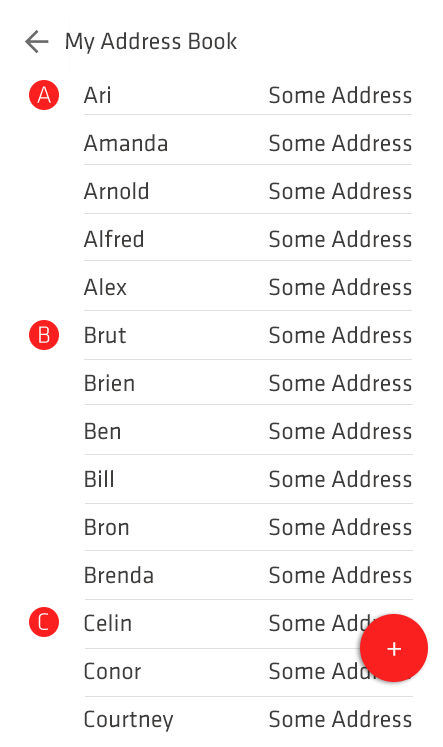
<style>
.page{position:relative;width:443px;height:747px;background:#ffffff}
.page>*{position:absolute;margin:0}
.t1{font:24.5px "KlavikaRegular-Plain";color:#3f3d3c}
.t2{font:24.5px "KlavikaLight-OSF";color:#ffffff}
.t3{font:24.5px/24px "KlavikaRegular-Plain";color:#3f3d3c}
.t4{font:33px "KlavikaLight-OSF";color:#ffffff}
</style>
<div class="page">
<p class="t1" style="left:66px;top:32px;width:171px;height:22px">My Address Book</p>
<p class="t2" style="left:37px;top:86px;width:14px;height:17px">A</p>
<p class="t3" style="left:83px;top:86px;width:91px;height:646px">Ari<br><br>Amanda<br><br>Arnold<br><br>Alfred<br><br>Alex<br><br>Brut<br><br>Brien<br><br>Ben<br><br>Bill<br><br>Bron<br><br>Brenda<br><br>Celin<br><br>Conor<br><br>Courtney</p>
<p class="t3" style="left:269px;top:86px;width:143px;height:642px;text-align:right">Some Address<br><br>Some Address<br><br>Some Address<br><br>Some Address<br><br>Some Address<br><br>Some Address<br><br>Some Address<br><br>Some Address<br><br>Some Address<br><br>Some Address<br><br>Some Address<br><br>Some Address<br><br>Some Address<br><br>Some Address</p>
<p class="t2" style="left:39px;top:326px;width:11px;height:17px">B</p>
<p class="t2" style="left:38px;top:613px;width:10px;height:17px">C</p>
<p class="t4" style="left:387px;top:642px;width:14px;height:14px">+</p>
</div>
